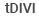
<style>
.page{position:relative;width:39px;height:16px;background:#ffffff}
.page>*{position:absolute;margin:0}
.t1{font:14px "Roboto-Medium";color:#4a4a4a}
</style>
<div class="page">
<p class="t1" style="left:4px;top:3px;width:31px;height:10px">tDIVI</p>
</div>
